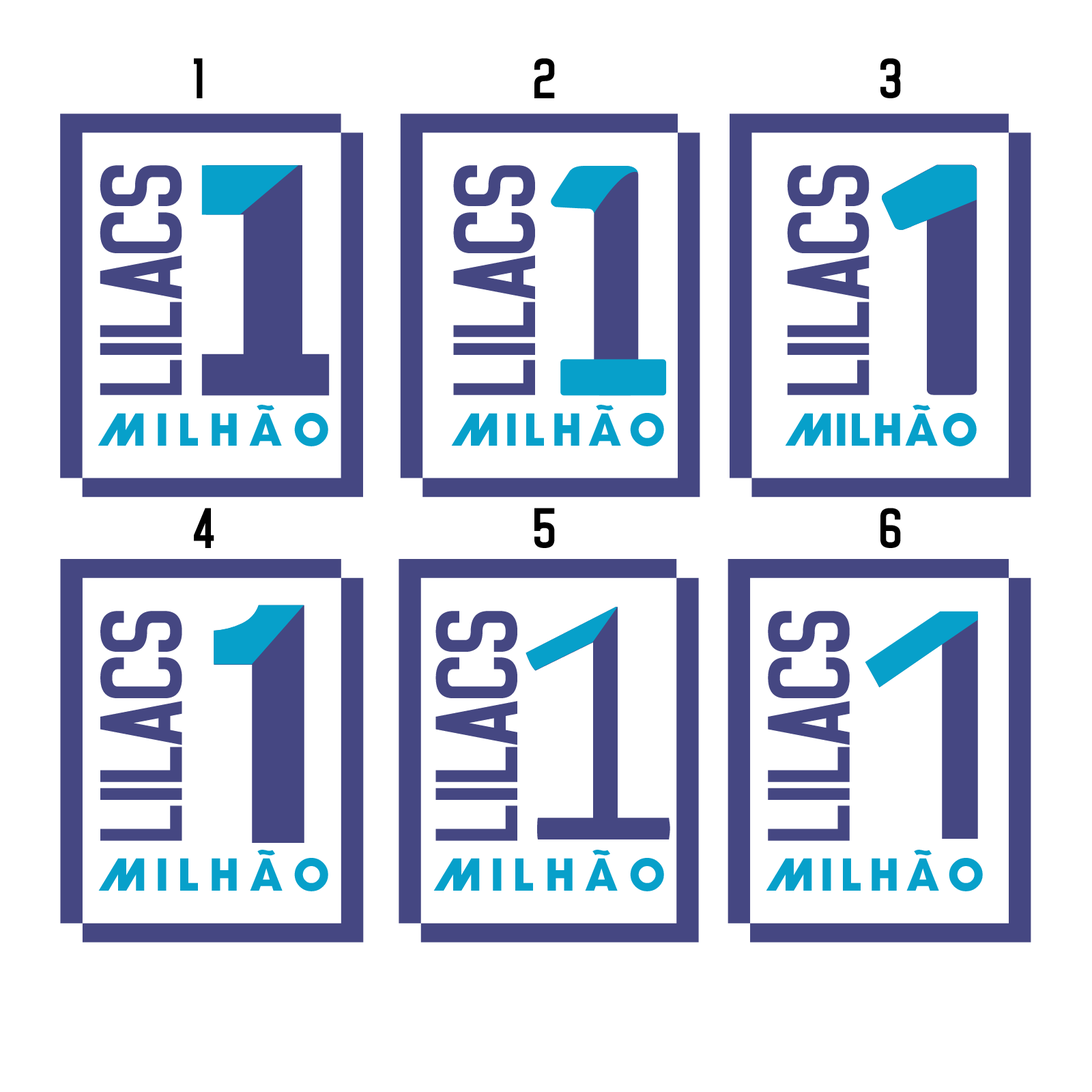
<style>
.page{position:relative;width:1092px;height:1092px;background:#ffffff}
.page>*{position:absolute;margin:0}
.t1{font:58.5px "Noasarck";color:#000000}
.t2{font:119px "Noasarck";color:#454782}
.t3{font:310.8px "RedeGlobo-Bold";letter-spacing:0.1em;color:#454782}
.t4{font:329px "BaronNeueBlack";letter-spacing:0.1em;color:#454782}
.t5{font:43.5px "RedeGlobo-Bold";letter-spacing:0.26em;color:#07a0ca}
.t6{font:43.5px "RedeGlobo-Bold";letter-spacing:0.18em;color:#07a0ca}
.t7{font:43.5px "RedeGlobo-Bold";letter-spacing:0.08em;color:#07a0ca}
.t8{font:302.2px "HelveticaInserat";letter-spacing:0.1em;color:#454782}
.t9{font:358.7px "Aller-Light";letter-spacing:0.1em;color:#454782}
.t10{font:320.6px "Eurocine-Regular";letter-spacing:0.1em;color:#454782}
.t11{font:43.5px "RedeGlobo-Bold";letter-spacing:0.2em;color:#07a0ca}
</style>
<div class="page">
<p class="t1" style="left:194px;top:58px;width:9px;height:40px">1</p>
<p class="t1" style="left:534px;top:58px;width:21px;height:40px">2</p>
<p class="t1" style="left:880px;top:58px;width:21px;height:40px">3</p>
<p class="t2" style="left:100px;top:165px;width:82px;height:230px;rotate:-90deg">LILACS</p>
<p class="t3" style="left:205px;top:165px;width:97px;height:230px">1</p>
<p class="t2" style="left:453px;top:165px;width:82px;height:230px;rotate:-90deg">LILACS</p>
<p class="t2" style="left:787px;top:165px;width:82px;height:230px;rotate:-90deg">LILACS</p>
<p class="t4" style="left:882px;top:164px;width:95px;height:231px">1</p>
<p class="t5" style="left:98px;top:405px;width:230px;height:41px">milhÃo</p>
<p class="t6" style="left:451px;top:405px;width:213px;height:41px">milhÃo</p>
<p class="t7" style="left:785px;top:405px;width:192px;height:41px">milhÃo</p>
<p class="t1" style="left:194px;top:508px;width:20px;height:40px">4</p>
<p class="t1" style="left:534px;top:508px;width:21px;height:40px">5</p>
<p class="t1" style="left:880px;top:508px;width:21px;height:40px">6</p>
<p class="t8" style="left:214px;top:605px;width:90px;height:238px">1</p>
<p class="t2" style="left:100px;top:611px;width:82px;height:230px;rotate:-90deg">LILACS</p>
<p class="t2" style="left:435px;top:611px;width:82px;height:230px;rotate:-90deg">LILACS</p>
<p class="t9" style="left:526px;top:607px;width:144px;height:232px">1</p>
<p class="t2" style="left:768px;top:611px;width:82px;height:230px;rotate:-90deg">LILACS</p>
<p class="t10" style="left:867px;top:614px;width:111px;height:225px">1</p>
<p class="t5" style="left:98px;top:850px;width:230px;height:41px">milhÃo</p>
<p class="t5" style="left:433px;top:850px;width:231px;height:41px">milhÃo</p>
<p class="t11" style="left:766px;top:850px;width:217px;height:41px">milhÃo</p>
</div>
